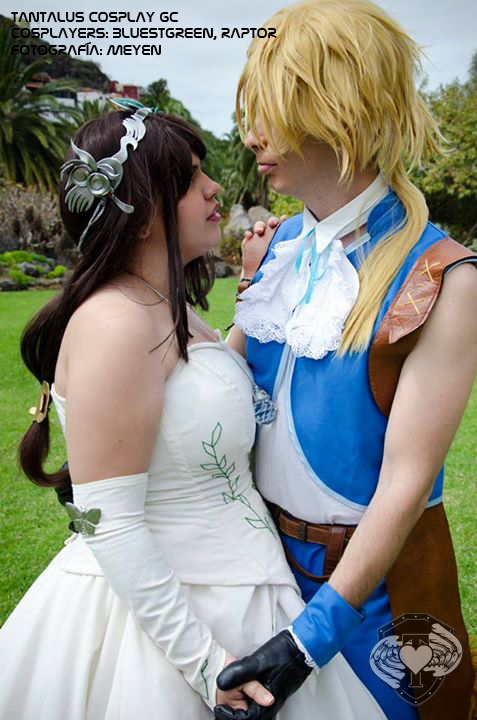
<style>
.page{position:relative;width:477px;height:720px}
.page>*{position:absolute;margin:0}
.t1{font:14px "NasalizationRg-Regular";color:#000000}
</style>
<div class="page">
<p class="t1" style="left:11px;top:12px;width:266px;height:43px">TANTALUS COSPLAY GC<br>COSPLAYERS: BLUESTGREEN, RAPTOR<br>FOTOGRAFÍA: MEYEN</p>
</div>
